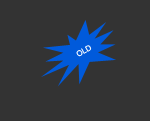
<style>
.page{position:relative;width:150px;height:121px;background:#333333}
.page>*{position:absolute;margin:0}
.t1{font:7.8px "ArialMT"}
</style>
<div class="page">
<p class="t1" style="left:76px;top:45px;width:16px;height:12px;rotate:-29deg">OLD</p>
</div>
